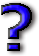
<style>
.page{position:relative;width:39px;height:56px;background:#ffffff}
.page>*{position:absolute;margin:0}
.t1{font:64px "Verdana-Bold"}
</style>
<div class="page">
<p class="t1" style="left:1px;top:3px;width:31px;height:48px">?</p>
</div>
